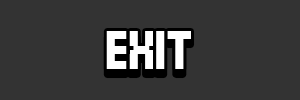
<style>
.page{position:relative;width:300px;height:100px;background:#333333}
.page>*{position:absolute;margin:0}
.t1{font:30.6px "FFFForward";color:#ffffff}
</style>
<div class="page">
<p class="t1" style="left:106px;top:31px;width:85px;height:38px">EXIT</p>
</div>
